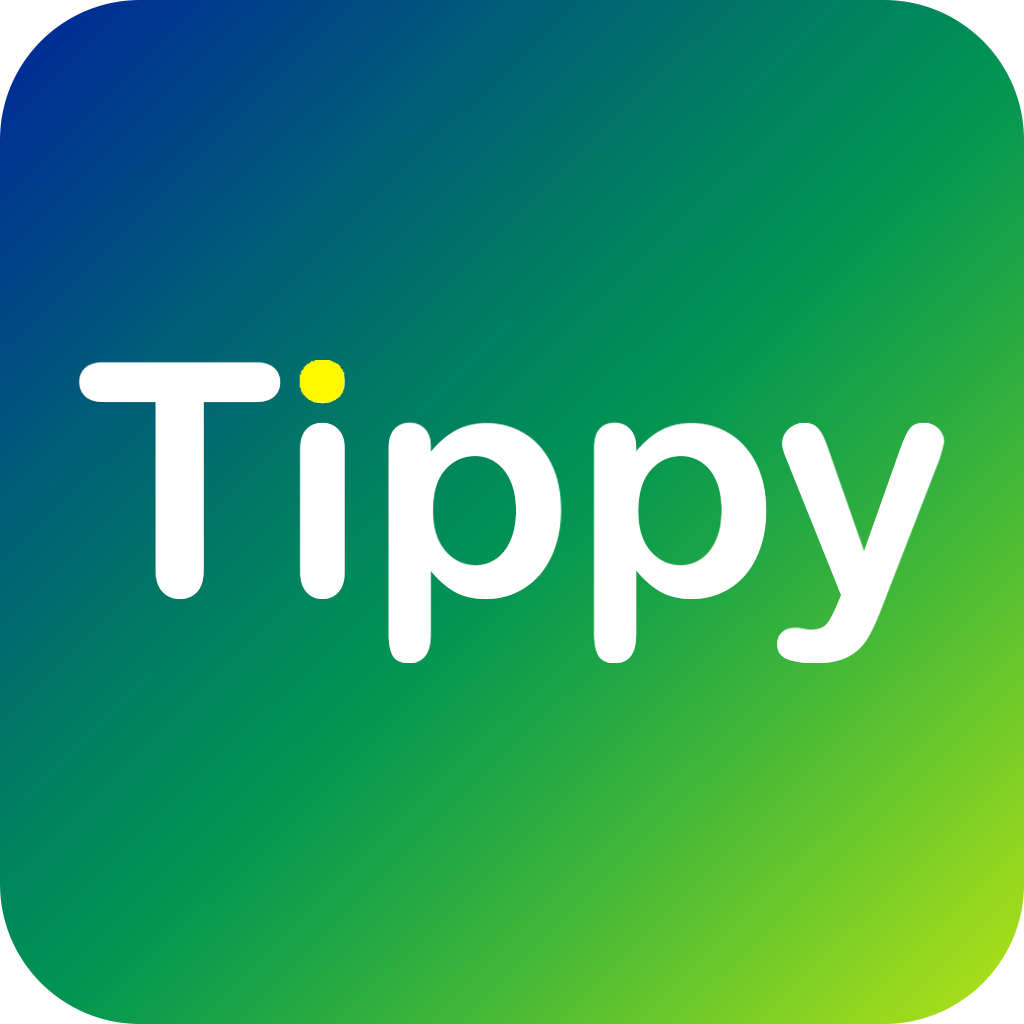
<style>
.page{position:relative;width:1024px;height:1024px}
.page>*{position:absolute;margin:0}
.t1{font:324px "ArialRoundedMTBold";color:#ffffff}
</style>
<div class="page">
<p class="t1" style="left:79px;top:361px;width:865px;height:302px">Tippy</p>
</div>
